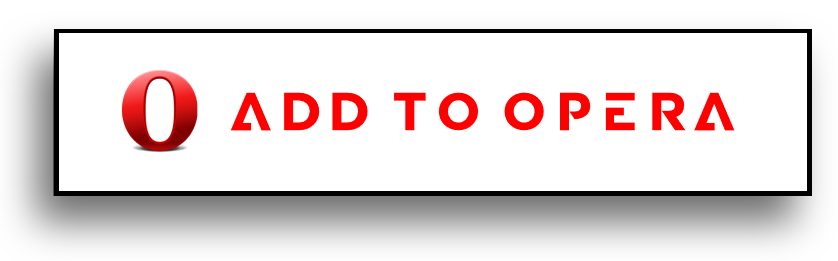
<style>
.page{position:relative;width:838px;height:261px;background:#ffffff}
.page>*{position:absolute;margin:0}
.t1{font:53px "BabaPro-Bold";color:#ff0000}
</style>
<div class="page">
<p class="t1" style="left:230px;top:92px;width:505px;height:39px">Add to OPERA</p>
</div>
